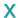
<style>
.page{position:relative;width:18px;height:18px;background:#ffffff}
.page>*{position:absolute;margin:0}
.t1{font:23.4px "GothicMB101Pro-Regular";letter-spacing:-0.04em;color:#239e9f;font-weight:bold;scale:0.85 1}
</style>
<div class="page">
<p class="t1" style="left:3px;top:4px;width:13px;height:14px">x</p>
</div>
